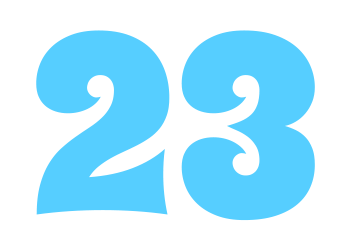
<style>
.page{position:relative;width:354px;height:236px;background:#ffffff}
.page>*{position:absolute;margin:0}
.t1{font:250px "SpicyRice-Regular";color:#56ceff}
</style>
<div class="page">
<p class="t1" style="left:36px;top:30px;width:279px;height:191px">23</p>
</div>
